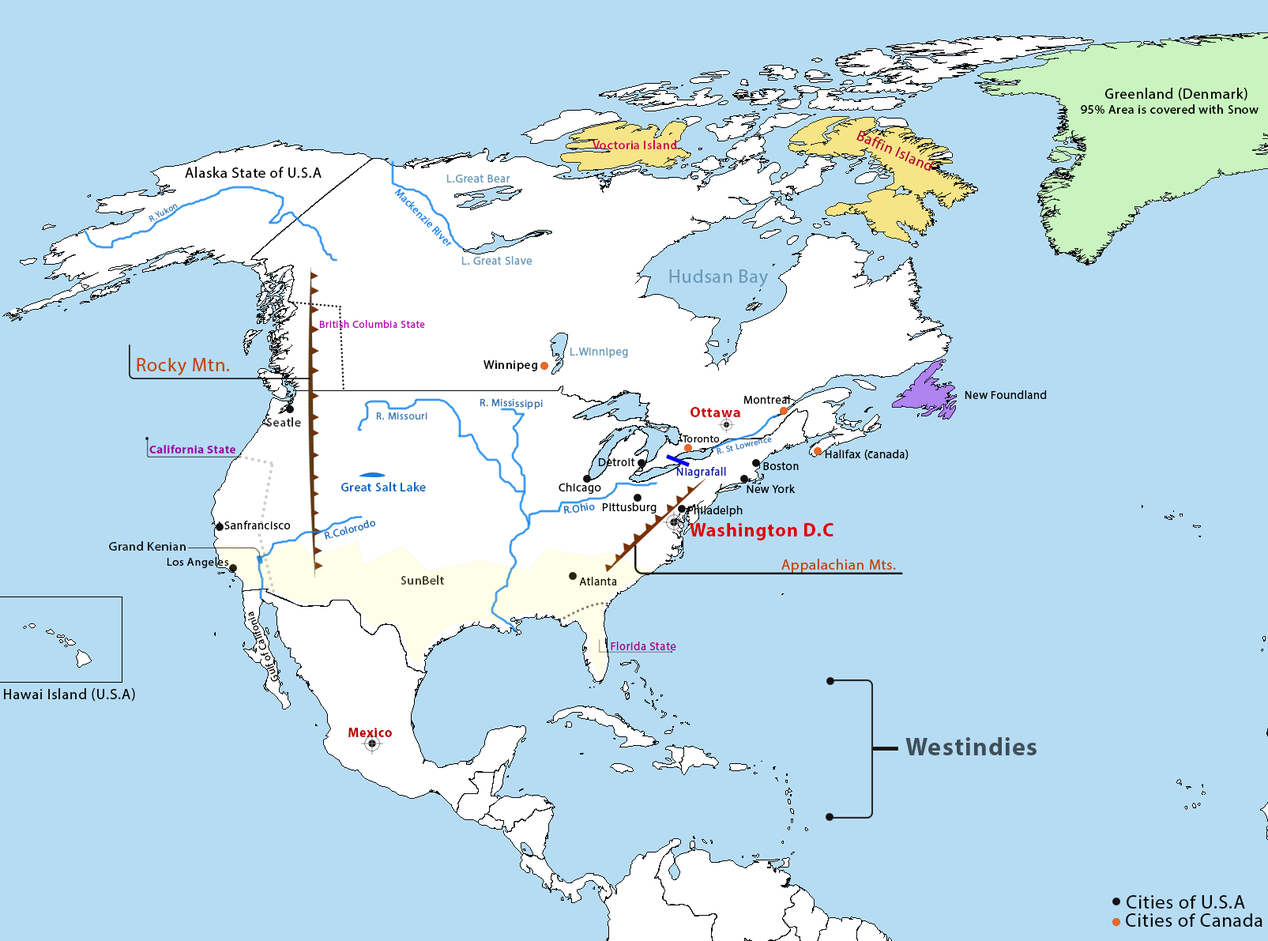
<style>
.page{position:relative;width:1268px;height:941px;background:#b6dcf4}
.page>*{position:absolute;margin:0}
.t1{font:14.7px "MyriadHebrew-Regular";letter-spacing:0.04em;color:#000000}
.t2{font:12.6px "MyriadHebrew-Regular";letter-spacing:0.04em;color:#000000}
.t3{font:14.7px "MyriadHebrew-Regular";letter-spacing:0.04em;color:#b40037}
.t4{font:9.5px "MyriadHebrew-Regular";letter-spacing:0.04em;color:#cf0053}
.t5{font:11.6px "MyriadHebrew-Regular";letter-spacing:0.04em;color:#6a9ab8}
.t6{font:10.5px "MyriadHebrew-Regular";letter-spacing:0.04em;color:#0c80ec}
.t7{font:8.4px "MyriadHebrew-Regular";letter-spacing:0.04em;color:#397bb5}
.t8{font:19px "MyriadHebrew-Regular";letter-spacing:0.04em;color:#6a9ab8}
.t9{font:10.5px "MyriadHebrew-Regular";letter-spacing:0.04em;color:#ba00b8}
.t10{font:19px "MyriadHebrew-Regular";letter-spacing:0.04em;color:#c24501}
.t11{font:9.5px "MyriadHebrew-Regular";letter-spacing:0.04em;color:#000000}
.t12{font:10.5px "MyriadHebrew-Regular";letter-spacing:0.04em;color:#3471aa}
.t13{font:11.6px "MyriadHebrew-Regular";letter-spacing:0.04em;color:#000000}
.t14{font:10.5px "MyriadHebrew-Regular";letter-spacing:0.04em;color:#397bb5}
.t15{font:14.7px "MyriadHebrew-Bold";letter-spacing:0.04em;color:#cd0000}
.t16{font:9.5px "MyriadHebrew-Regular";letter-spacing:0.04em;color:#2d2c2d}
.t17{font:10.5px "MyriadHebrew-Regular";letter-spacing:0.04em;color:#000000}
.t18{font:11.6px "MyriadHebrew-Bold";letter-spacing:0.04em;color:#9b00a9}
.t19{font:11.6px "MyriadHebrew-Regular";letter-spacing:0.04em;color:#0313ab}
.t20{font:9.5px "MyriadHebrew-Regular";letter-spacing:0.04em;color:#0165c2}
.t21{font:10.5px "MyriadHebrew-Regular";letter-spacing:0.04em;color:#156cbd}
.t22{font:19px "MyriadHebrew-Bold";letter-spacing:0.04em;color:#de0000}
.t23{font:12.6px "MyriadHebrew-Regular";letter-spacing:0.04em;color:#181818}
.t24{font:14.7px "MyriadHebrew-Regular";letter-spacing:0.04em;color:#c24501}
.t25{font:12.6px "MyriadHebrew-Regular";letter-spacing:0.04em;color:#2d2c2d}
.t26{font:10.2px "MyriadHebrew-Regular";letter-spacing:0.04em;color:#000000}
.t27{font:11.6px "MyriadHebrew-Regular";letter-spacing:0.04em;color:#a4008b}
.t28{font:14.7px "MyriadHebrew-Regular";letter-spacing:0.04em;color:#0b0b0b}
.t29{font:13.4px "MyriadHebrew-Bold";letter-spacing:0.04em;color:#bf0000}
.t30{font:25.3px "MyriadHebrew-Bold";letter-spacing:0.04em;color:#3f4e57}
.t31{font:19px "MyriadHebrew-Regular";letter-spacing:0.04em;color:#0b0b0b}
</style>
<div class="page">
<p class="t1" style="left:1105px;top:88px;width:142px;height:13px">Greenland (Denmark)</p>
<p class="t2" style="left:1080px;top:104px;width:178px;height:10px">95% Area is covered with Snow</p>
<p class="t3" style="left:856px;top:130px;width:78px;height:41px;rotate:23deg">Baffin Island</p>
<p class="t4" style="left:592px;top:140px;width:84px;height:9px">Voctoria Island</p>
<p class="t1" style="left:185px;top:167px;width:136px;height:11px">Alaska State of U.S.A</p>
<p class="t5" style="left:446px;top:175px;width:64px;height:7px">L.Great Bear</p>
<p class="t6" style="left:394px;top:188px;width:58px;height:58px;rotate:46deg">Mackenzie RIver</p>
<p class="t7" style="left:148px;top:204px;width:30px;height:18px;rotate:-28deg">R.Yukon</p>
<p class="t5" style="left:461px;top:256px;width:71px;height:9px">L. Great Slave</p>
<p class="t8" style="left:669px;top:269px;width:99px;height:18px">Hudsan Bay</p>
<p class="t9" style="left:319px;top:320px;width:106px;height:8px">British Columbia State</p>
<p class="t5" style="left:569px;top:348px;width:59px;height:10px">L.Winnipeg</p>
<p class="t10" style="left:137px;top:358px;width:93px;height:18px">Rocky Mtn.</p>
<p class="t11" style="left:483px;top:360px;width:54px;height:11px">Winnipeg</p>
<p class="t12" style="left:479px;top:398px;width:64px;height:11px;rotate:1deg">R. Mississippi</p>
<p class="t13" style="left:743px;top:395px;width:47px;height:9px">Montreal</p>
<p class="t13" style="left:964px;top:390px;width:83px;height:9px">New Foundland</p>
<p class="t14" style="left:376px;top:412px;width:51px;height:7px">R. Missouri</p>
<p class="t15" style="left:690px;top:407px;width:50px;height:10px">Ottawa</p>
<p class="t16" style="left:266px;top:417px;width:35px;height:9px">Seatle</p>
<p class="t17" style="left:682px;top:435px;width:38px;height:7px">Toronto</p>
<p class="t7" style="left:716px;top:438px;width:56px;height:16px;rotate:-13deg">R. St Lowrence</p>
<p class="t18" style="left:149px;top:445px;width:86px;height:8px">California State</p>
<p class="t13" style="left:825px;top:449px;width:83px;height:11px">Halifax (canada)</p>
<p class="t13" style="left:598px;top:458px;width:37px;height:8px">Detroit</p>
<p class="t19" style="left:676px;top:467px;width:50px;height:11px">Niagrafall</p>
<p class="t13" style="left:763px;top:462px;width:35px;height:8px">Boston</p>
<p class="t20" style="left:341px;top:482px;width:85px;height:9px">Great Salt Lake</p>
<p class="t13" style="left:558px;top:483px;width:43px;height:11px">Chicago</p>
<p class="t13" style="left:746px;top:484px;width:49px;height:9px">New York</p>
<p class="t21" style="left:563px;top:502px;width:32px;height:11px;rotate:-8deg">R.Ohio</p>
<p class="t13" style="left:602px;top:502px;width:54px;height:11px">Pittusburg</p>
<p class="t13" style="left:687px;top:505px;width:55px;height:12px">Philadelph</p>
<p class="t13" style="left:224px;top:520px;width:67px;height:9px">Sanfrancisco</p>
<p class="t21" style="left:324px;top:520px;width:51px;height:19px;rotate:-16deg">R.Colorodo</p>
<p class="t22" style="left:690px;top:523px;width:143px;height:17px">Washington D.C</p>
<p class="t23" style="left:109px;top:541px;width:77px;height:9px">Grand Kenian</p>
<p class="t13" style="left:167px;top:557px;width:62px;height:11px">Los Angeles</p>
<p class="t24" style="left:781px;top:558px;width:115px;height:15px">Appalachian Mts.</p>
<p class="t25" style="left:400px;top:575px;width:44px;height:9px">SunBelt</p>
<p class="t13" style="left:579px;top:577px;width:38px;height:8px">Atlanta</p>
<p class="t26" style="left:248px;top:611px;width:30px;height:71px;rotate:-111deg">Gulf of Califonia</p>
<p class="t27" style="left:611px;top:641px;width:65px;height:9px">Florida State</p>
<p class="t28" style="left:4px;top:688px;width:131px;height:13px">Hawai Island (U.S.A)</p>
<p class="t29" style="left:348px;top:727px;width:44px;height:10px">Mexico</p>
<p class="t30" style="left:905px;top:737px;width:131px;height:18px">Westindies</p>
<p class="t31" style="left:1126px;top:895px;width:119px;height:13px">Cities of U.S.A</p>
<p class="t31" style="left:1125px;top:913px;width:137px;height:13px">Cities of Canada</p>
</div>
